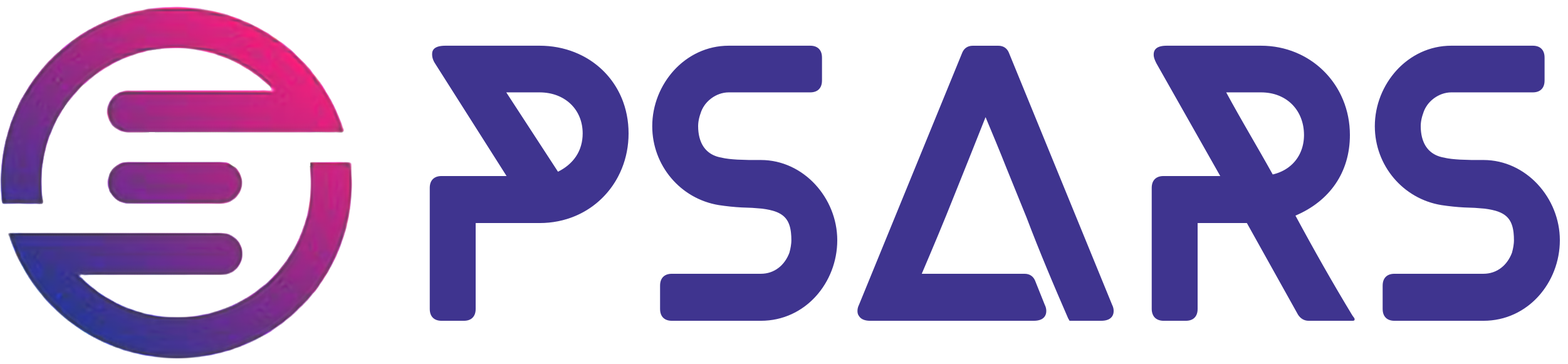
<style>
.page{position:relative;width:1568px;height:364px;background:#ffffff}
.page>*{position:absolute;margin:0}
.t1{font:391.7px "RobloxBlackRound";color:#3f348f}
</style>
<div class="page">
<p class="t1" style="left:429px;top:45px;width:1131px;height:276px">PSARS</p>
</div>
